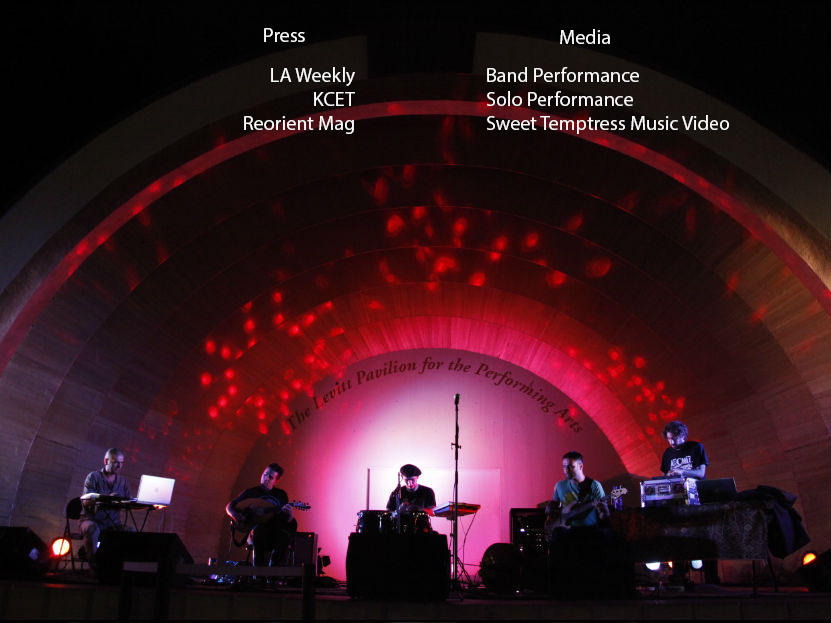
<style>
.page{position:relative;width:831px;height:623px}
.page>*{position:absolute;margin:0}
.t1{font:20px "MyriadPro-Regular";color:#fbfbfb}
</style>
<div class="page">
<p class="t1" style="left:264px;top:28px;width:41px;height:14px">Press</p>
<p class="t1" style="left:560px;top:29px;width:50px;height:15px">Media</p>
<p class="t1" style="left:271px;top:67px;width:84px;height:19px">LA Weekly</p>
<p class="t1" style="left:487px;top:67px;width:152px;height:15px">Band Performance</p>
<p class="t1" style="left:314px;top:92px;width:41px;height:14px">KCET</p>
<p class="t1" style="left:487px;top:91px;width:146px;height:15px">Solo Performance</p>
<p class="t1" style="left:244px;top:116px;width:110px;height:18px">Reorient Mag</p>
<p class="t1" style="left:487px;top:115px;width:242px;height:19px">Sweet Temptress Music Video</p>
</div>
